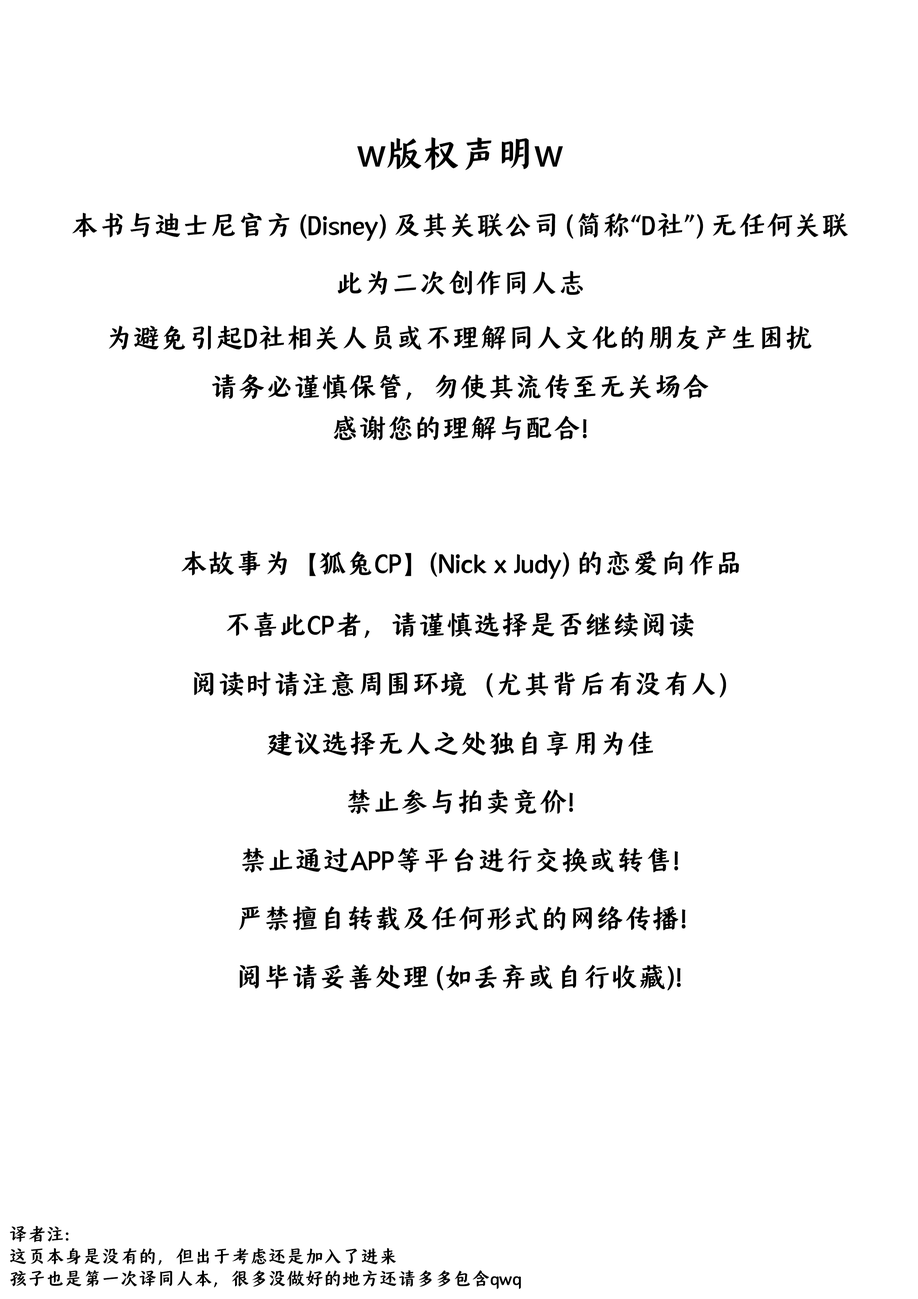
<style>
.page{position:relative;width:918px;height:1299px;background:#ffffff}
.page>*{position:absolute;margin:0}
.t1{font:37px "ShanHaiRuoShiKai-75W";color:#000000}
.t2{font:37px "AdobeHeitiStd-Regular";color:#000000}
.t3{font:27.8px "ShanHaiRuoShiKai-75W";color:#000000}
.t4{font:18.5px "ShanHaiRuoShiKai-75W";color:#000000}
.t5{font:18.5px/92.6px "ShanHaiRuoShiKai-75W";color:#000000}
</style>
<div class="page">
<p class="t1" style="left:357px;top:137px;width:206px;height:33px"><span class="t2">w</span>版权声明<span class="t2">w</span></p>
<p class="t3" style="left:72px;top:213px;width:776px;height:28px">本书与迪士尼官方 (Disney) 及其关联公司 (简称“D社”) 无任何关联</p>
<p class="t3" style="left:338px;top:270px;width:245px;height:25px">此为二次创作同人志</p>
<p class="t3" style="left:109px;top:325px;width:703px;height:25px">为避免引起D社相关人员或不理解同人文化的朋友产生困扰</p>
<p class="t3" style="left:212px;top:374px;width:497px;height:26px">请务必谨慎保管，勿使其流传至无关场合</p>
<p class="t3" style="left:334px;top:415px;width:253px;height:25px">感谢您的理解与配合！</p>
<p class="t3" style="left:181px;top:551px;width:558px;height:28px">本故事为【狐兔CP】(Nick x Judy) 的恋爱向作品</p>
<p class="t3" style="left:227px;top:612px;width:467px;height:26px">不喜此CP者，请谨慎选择是否继续阅读</p>
<p class="t3" style="left:194px;top:671px;width:532px;height:26px">阅读时请注意周围环境（尤其背后有没有人）</p>
<p class="t3" style="left:267px;top:731px;width:386px;height:25px">建议选择无人之处独自享用为佳</p>
<p class="t3" style="left:348px;top:789px;width:225px;height:25px">禁止参与拍卖竞价！</p>
<p class="t3" style="left:242px;top:847px;width:436px;height:26px">禁止通过APP等平台进行交换或转售！</p>
<p class="t3" style="left:239px;top:906px;width:447px;height:25px">严禁擅自转载及任何形式的网络传播！</p>
<p class="t3" style="left:240px;top:964px;width:441px;height:26px">阅毕请妥善处理 (如丢弃或自行收藏)！</p>
<p class="t4" style="left:10px;top:1225px;width:511px;height:64px"><span class="t5">译者注：</span><br>这页本身是没有的，但出于考虑还是加入了进来<br>孩子也是第一次译同人本，很多没做好的地方还请多多包含qwq</p>
</div>
